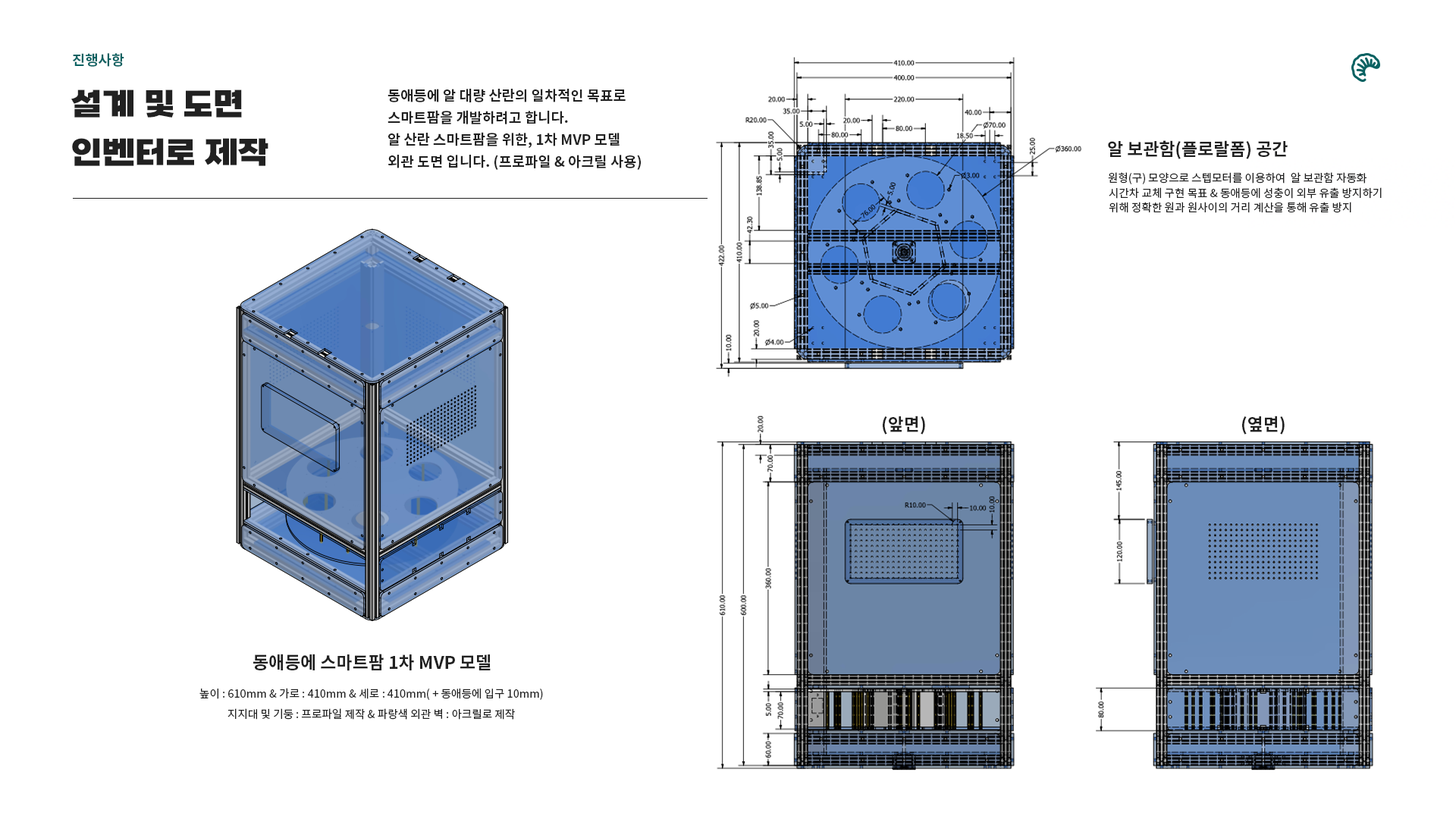
<style>
.page{position:relative;width:1456px;height:819px;background:#ffffff}
.page>*{position:absolute;margin:0}
.t1{font:14.2px "NotoSansKR-Bold";color:#0a6262;text-transform:uppercase}
.t2{font:31.6px/49px "SBAggroB";color:#212121;text-transform:uppercase}
.t3{font:14.2px/22.1px "NotoSansKR-Bold";color:#212121;text-transform:uppercase}
.t4{font:17.4px "NotoSansKR-Bold";color:#212121}
.t5{font:11.1px "NotoSansKR-Regular";color:#212121}
</style>
<div class="page">
<p class="t1" style="left:73px;top:53px;width:51px;height:14px">진행사항</p>
<p class="t2" style="left:71px;top:89px;width:197px;height:77px">설계 및 도면<br>인벤터로 제작</p>
<p class="t3" style="left:388px;top:89px;width:253px;height:81px">동애등에 알 대량 산란의 일차적인 목표로<br>스마트팜을 개발하려고 합니다.<br>알 산란 스마트팜을 위한, 1차 MVP 모델<br>외관 도면 입니다. (프로파일 &amp; 아크릴 사용)</p>
<p class="t4" style="left:1108px;top:140px;width:180px;height:19px">알 보관함(플로랄폼) 공간</p>
<p class="t5" style="left:1108px;top:172px;width:258px;height:12px">원형(구) 모양으로 스텝모터를 이용하여  알 보관함 자동화</p>
<p class="t5" style="left:1109px;top:187px;width:273px;height:12px">시간차 교체 구현 목표 &amp; 동애등에 성충이 외부 유출 방지하기</p>
<p class="t5" style="left:1109px;top:202px;width:242px;height:11px">위해 정확한 원과 원사이의 거리 계산을 통해 유출 방지</p>
<p class="t4" style="left:883px;top:416px;width:42px;height:19px">(앞면)</p>
<p class="t4" style="left:1242px;top:416px;width:43px;height:19px">(옆면)</p>
<p class="t4" style="left:253px;top:654px;width:238px;height:17px">동애등에 스마트팜 1차 MVP 모델</p>
<p class="t5" style="left:199px;top:688px;width:344px;height:12px">높이 : 610mm &amp; 가로 : 410mm &amp; 세로 : 410mm( + 동애등에 입구 10mm)</p>
<p class="t5" style="left:227px;top:708px;width:288px;height:12px">지지대 및 기둥 : 프로파일 제작 &amp; 파랑색 외관 벽 : 아크릴로 제작</p>
</div>
